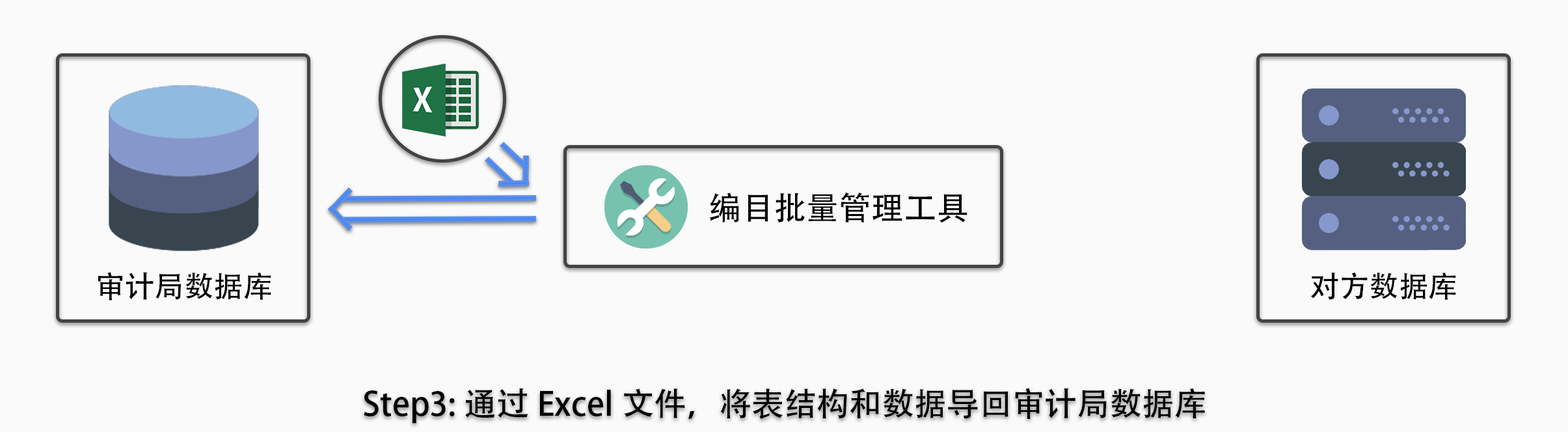
<style>
.page{position:relative;width:1568px;height:432px;background:#fafafa}
.page>*{position:absolute;margin:0}
.t1{font:32.5px "AdobeHeitiStd-Regular";color:#000000}
.t2{font:29.6px "AdobeHeitiStd-Regular";color:#000000}
</style>
<div class="page">
<p class="t1" style="left:709px;top:192px;width:258px;height:31px">编目批量管理工具</p>
<p class="t2" style="left:98px;top:272px;width:173px;height:29px">审计局数据库</p>
<p class="t2" style="left:1310px;top:272px;width:146px;height:28px">对方数据库</p>
<p class="t1" style="left:364px;top:388px;width:841px;height:36px">Step3:通过Excel文件，将表结构和数据导回审计局数据库</p>
</div>
